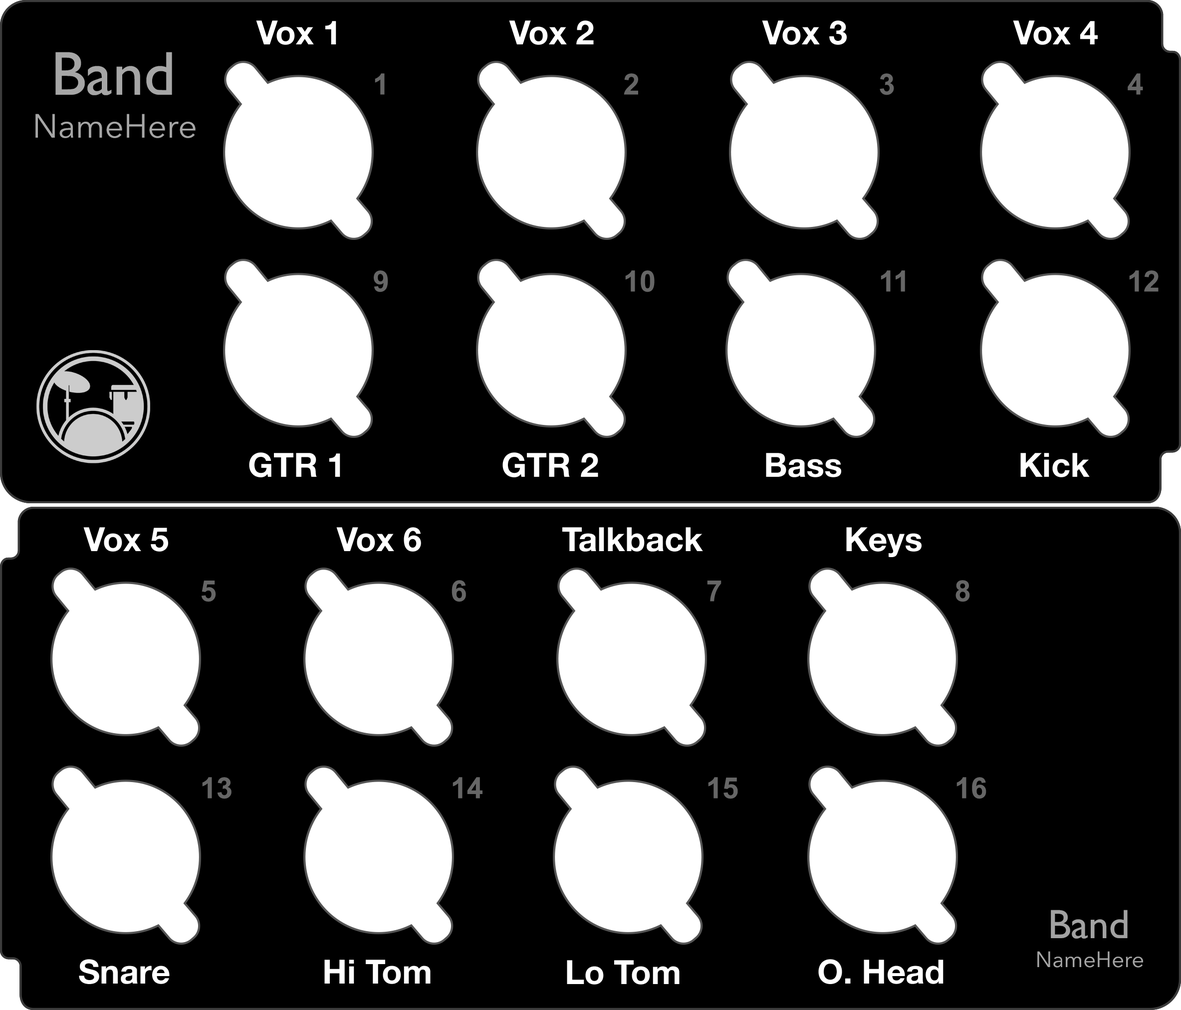
<style>
.page{position:relative;width:1181px;height:1010px;background:#000000}
.page>*{position:absolute;margin:0}
.t1{font:33.3px "HelveticaNeue-Bold";color:#ffffff}
.t2{font:62.3px "GillSans";color:#a6a6a6}
.t3{font:29.1px "Arial-BoldMT";color:#666666}
.t4{font:33.3px "AvenirNext-Regular";color:#a6a6a6}
.t5{font:41.2px "GillSans";color:#a2a2a2}
.t6{font:21.9px "AvenirNext-Regular";color:#a6a6a6}
</style>
<div class="page">
<p class="t1" style="left:256px;top:20px;width:80px;height:25px">Vox 1</p>
<p class="t1" style="left:509px;top:20px;width:85px;height:25px">Vox 2</p>
<p class="t1" style="left:762px;top:20px;width:84px;height:25px">Vox 3</p>
<p class="t1" style="left:1013px;top:20px;width:84px;height:25px">Vox 4</p>
<p class="t2" style="left:55px;top:52px;width:117px;height:43px">Band</p>
<p class="t3" style="left:375px;top:73px;width:10px;height:22px">1</p>
<p class="t3" style="left:623px;top:73px;width:15px;height:22px">2</p>
<p class="t3" style="left:879px;top:73px;width:15px;height:22px">3</p>
<p class="t3" style="left:1127px;top:73px;width:16px;height:22px">4</p>
<p class="t4" style="left:35px;top:114px;width:161px;height:24px">NameHere</p>
<p class="t3" style="left:374px;top:270px;width:14px;height:22px">9</p>
<p class="t3" style="left:625px;top:270px;width:29px;height:22px">10</p>
<p class="t3" style="left:880px;top:270px;width:25px;height:22px">11</p>
<p class="t3" style="left:1129px;top:270px;width:29px;height:22px">12</p>
<p class="t1" style="left:249px;top:452px;width:91px;height:25px">GTR 1</p>
<p class="t1" style="left:502px;top:452px;width:96px;height:25px">GTR 2</p>
<p class="t1" style="left:766px;top:453px;width:75px;height:24px">Bass</p>
<p class="t1" style="left:1020px;top:453px;width:69px;height:24px">Kick</p>
<p class="t1" style="left:83px;top:527px;width:85px;height:25px">Vox 5</p>
<p class="t1" style="left:336px;top:527px;width:85px;height:25px">Vox 6</p>
<p class="t1" style="left:562px;top:527px;width:141px;height:25px">Talkback</p>
<p class="t1" style="left:846px;top:527px;width:75px;height:30px">Keys</p>
<p class="t3" style="left:201px;top:581px;width:15px;height:21px">5</p>
<p class="t3" style="left:451px;top:580px;width:15px;height:22px">6</p>
<p class="t3" style="left:707px;top:581px;width:14px;height:21px">7</p>
<p class="t3" style="left:955px;top:580px;width:15px;height:22px">8</p>
<p class="t3" style="left:202px;top:777px;width:29px;height:22px">13</p>
<p class="t3" style="left:452px;top:777px;width:30px;height:22px">14</p>
<p class="t3" style="left:708px;top:777px;width:30px;height:22px">15</p>
<p class="t3" style="left:956px;top:777px;width:30px;height:22px">16</p>
<p class="t5" style="left:1050px;top:910px;width:77px;height:29px">Band</p>
<p class="t6" style="left:1037px;top:951px;width:106px;height:17px">NameHere</p>
<p class="t1" style="left:79px;top:959px;width:91px;height:25px">Snare</p>
<p class="t1" style="left:324px;top:960px;width:106px;height:24px">Hi Tom</p>
<p class="t1" style="left:567px;top:960px;width:112px;height:25px">Lo Tom</p>
<p class="t1" style="left:818px;top:959px;width:125px;height:25px">O. Head</p>
</div>
